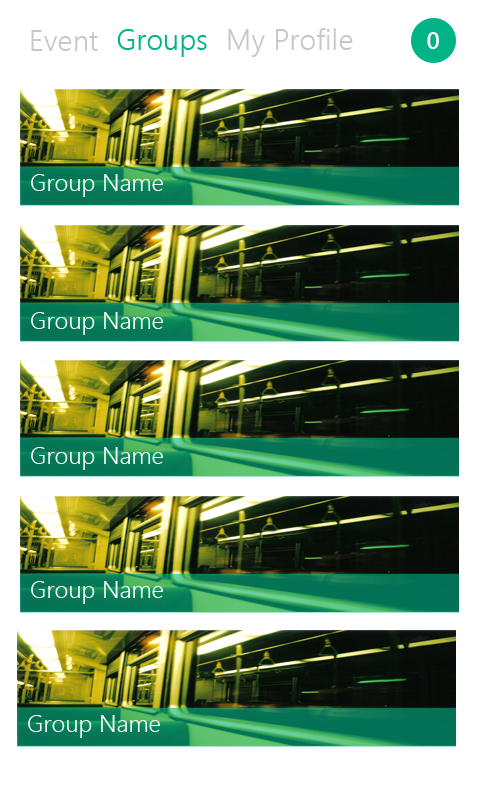
<style>
.page{position:relative;width:480px;height:800px;background:#ffffff}
.page>*{position:absolute;margin:0}
.t1{font:29.4px "SegoeUI-Semilight";color:#c7c7c7}
.t2{font:29.4px "SegoeUI-Semilight";color:#00b487}
.t3{font:24px "SegoeUI-Semibold";color:#ffffff}
.t4{font:24px "SegoeUI-Semilight";color:#ffffff}
</style>
<div class="page">
<p class="t1" style="left:31px;top:30px;width:67px;height:21px">Event</p>
<p class="t2" style="left:117px;top:29px;width:90px;height:28px">Groups</p>
<p class="t1" style="left:228px;top:28px;width:125px;height:29px">My Profile</p>
<p class="t3" style="left:427px;top:32px;width:12px;height:17px">0</p>
<p class="t4" style="left:31px;top:174px;width:132px;height:23px">Group Name</p>
<p class="t4" style="left:31px;top:312px;width:132px;height:23px">Group Name</p>
<p class="t4" style="left:31px;top:447px;width:132px;height:23px">Group Name</p>
<p class="t4" style="left:31px;top:581px;width:132px;height:23px">Group Name</p>
<p class="t4" style="left:28px;top:715px;width:132px;height:23px">Group Name</p>
</div>
